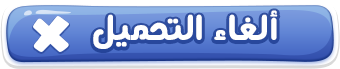
<style>
.page{position:relative;width:340px;height:69px}
.page>*{position:absolute;margin:0}
.t1{font:38px "ANegaar-Bold";letter-spacing:0.01em;color:#ffffff}
</style>
<div class="page">
<p class="t1" style="left:93px;top:10px;width:185px;height:39px">ألغاء التحميل</p>
</div>
